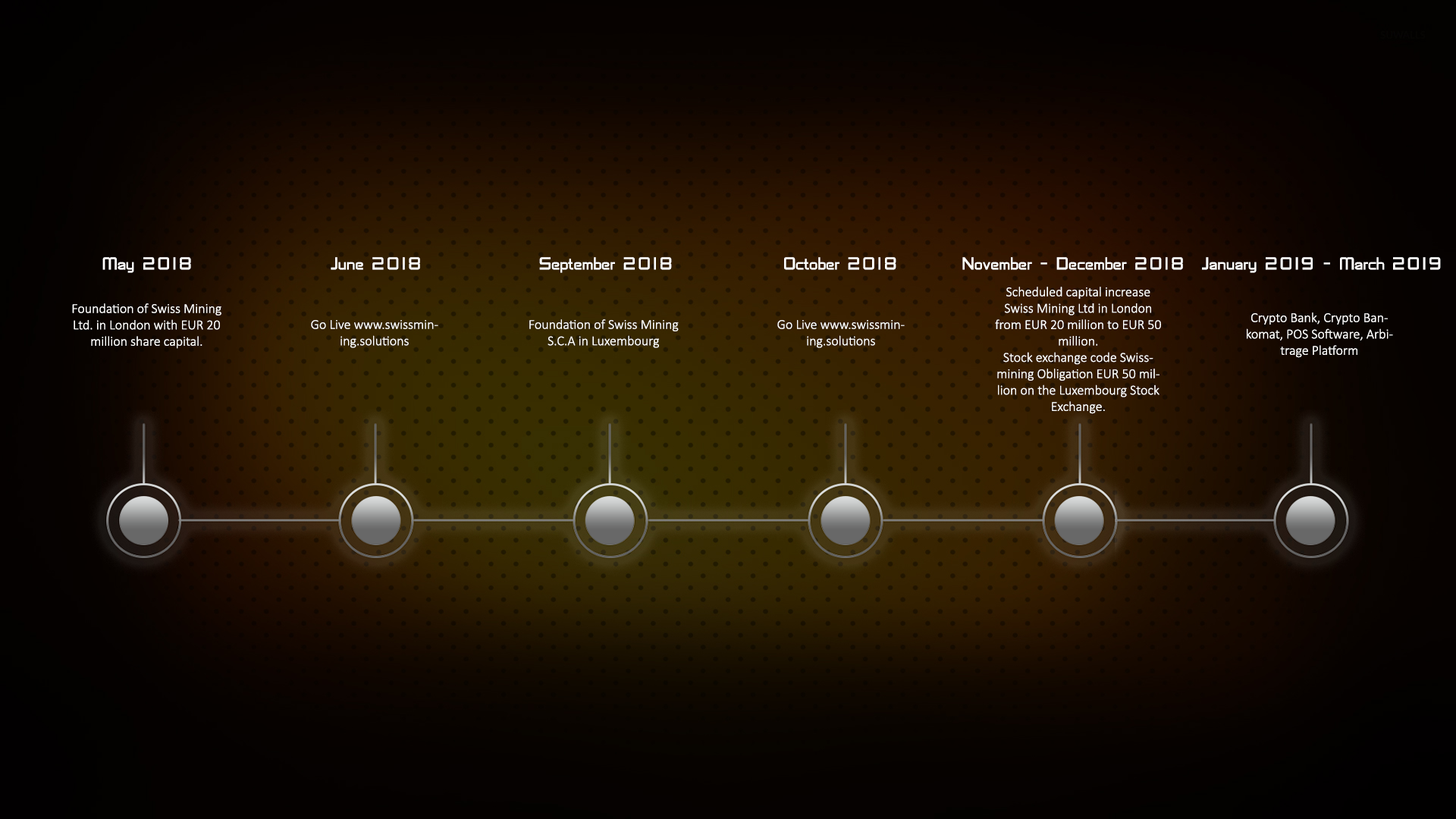
<style>
.page{position:relative;width:1456px;height:819px}
.page>*{position:absolute;margin:0}
.t1{font:18.2px "SFChaerilidae";color:#ffffff}
.t2{font:13.6px "Calibri-Light";color:#ffffff}
</style>
<div class="page">
<p class="t1" style="left:102px;top:257px;width:89px;height:16px">May 2018</p>
<p class="t1" style="left:331px;top:257px;width:89px;height:13px">June 2018</p>
<p class="t1" style="left:539px;top:257px;width:133px;height:16px">September 2018</p>
<p class="t1" style="left:784px;top:257px;width:112px;height:13px">October 2018</p>
<p class="t1" style="left:962px;top:257px;width:221px;height:13px">November - December 2018</p>
<p class="t1" style="left:1202px;top:257px;width:239px;height:16px">January 2019 - March 2019</p>
<p class="t2" style="left:995px;top:287px;width:166px;height:127px;text-align:center">Scheduled capital increase Swiss Mining Ltd in London from EUR 20 million to EUR 50 million.<br>Stock exchange code Swissmining Obligation EUR 50 million on the Luxembourg Stock Exchange.</p>
<p class="t2" style="left:72px;top:303px;width:149px;height:46px;text-align:center">Foundation of Swiss Mining Ltd. in London with EUR 20 million share capital.</p>
<p class="t2" style="left:1247px;top:312px;width:146px;height:46px;text-align:center">Crypto Bank, Crypto Bankomat, POS Software, Arbitrage Platform</p>
<p class="t2" style="left:311px;top:320px;width:127px;height:28px;text-align:center">Go Live www.swissmining.solutions</p>
<p class="t2" style="left:529px;top:319px;width:150px;height:29px;text-align:center">Foundation of Swiss Mining S.C.A in Luxembourg</p>
<p class="t2" style="left:777px;top:320px;width:128px;height:28px;text-align:center">Go Live www.swissmining.solutions</p>
</div>
